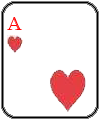
<style>
.page{position:relative;width:100px;height:120px;background:#ffffff}
.page>*{position:absolute;margin:0}
.t1{font:18px "Castellar";color:#ff0000}
</style>
<div class="page">
<p class="t1" style="left:7px;top:17px;width:15px;height:13px">A</p>
</div>
